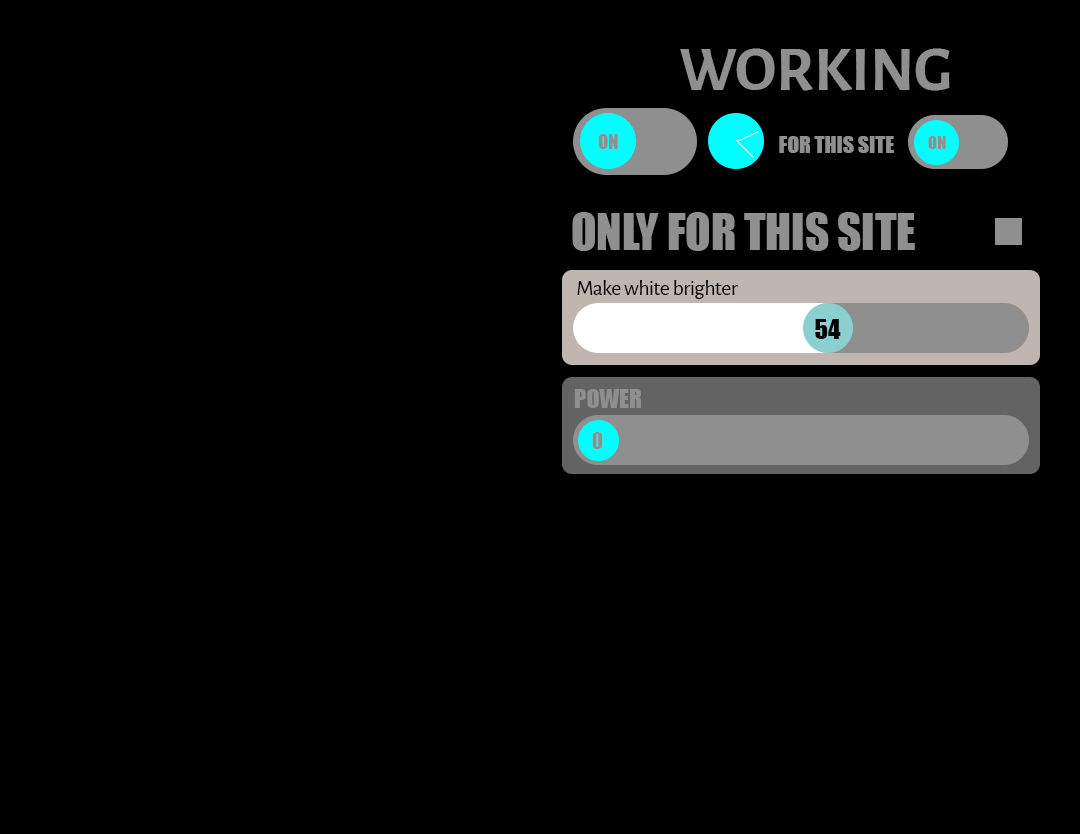
<style>
.page{position:relative;width:1080px;height:834px;background:#000000}
.page>*{position:absolute;margin:0}
.t1{font:64px "AlegreyaSans-Bold";color:#8f8f8f;text-transform:uppercase}
.t2{font:18.5px "Impact";color:#8f8f8f;text-transform:uppercase}
.t3{font:21.6px "Impact";color:#8f8f8f;text-transform:uppercase}
.t4{font:17.1px "Impact";color:#8f8f8f;text-transform:uppercase}
.t5{font:46.6px "Impact";color:#8f8f8f;text-transform:uppercase}
.t6{font:22px "AlegreyaSans-Regular";letter-spacing:-0.02em;color:#000000}
.t7{font:24.8px "Impact";color:#000000;text-transform:uppercase}
.t8{font:24px "Impact";color:#8f8f8f;text-transform:uppercase}
.t9{font:20.5px "Impact";color:#8f8f8f;text-transform:uppercase}
</style>
<div class="page">
<p class="t1" style="left:680px;top:48px;width:270px;height:43px">working</p>
<p class="t2" style="left:598px;top:134px;width:20px;height:15px">on</p>
<p class="t3" style="left:779px;top:136px;width:115px;height:17px">for this site</p>
<p class="t4" style="left:928px;top:136px;width:18px;height:13px">on</p>
<p class="t5" style="left:572px;top:212px;width:343px;height:39px">only for this site</p>
<p class="t6" style="left:577px;top:280px;width:161px;height:19px">Make white brighter</p>
<p class="t7" style="left:815px;top:319px;width:26px;height:20px">54</p>
<p class="t8" style="left:574px;top:389px;width:67px;height:19px">power</p>
<p class="t9" style="left:592px;top:432px;width:11px;height:17px">0</p>
</div>
